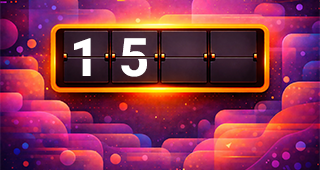
<style>
.page{position:relative;width:320px;height:170px}
.page>*{position:absolute;margin:0}
.t1{font:52.8px "Roboto-Bold";letter-spacing:0.075em;color:#ffffff}
</style>
<div class="page">
<p class="t1" style="left:74px;top:38px;width:17px;height:38px">1</p>
<p class="t1" style="left:121px;top:38px;width:26px;height:39px">5</p>
</div>
